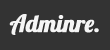
<style>
.page{position:relative;width:110px;height:50px;background:#333333}
.page>*{position:absolute;margin:0}
.t1{font:24px "Lobster1.4";letter-spacing:-0.02em;color:#ffffff;font-weight:bold}
</style>
<div class="page">
<p class="t1" style="left:9px;top:14px;width:90px;height:21px;opacity:0.95">Adminre.</p>
</div>
